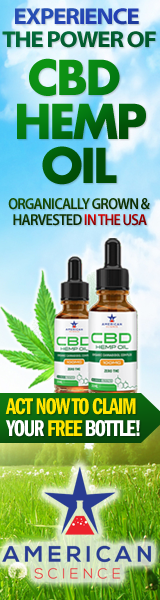
<style>
.page{position:relative;width:160px;height:600px}
.page>*{position:absolute;margin:0}
.t1{font:22.9px/23px "MyriadPro-BoldSemiExt";letter-spacing:-0.05em;color:#02683a;text-transform:uppercase}
.t2{font:22.9px/23px "MyriadPro-BoldSemiExt";letter-spacing:-0.05em;color:#233fb4;text-transform:uppercase}
.t3{font:46.7px/44px "FuturaLT-Bold";letter-spacing:-0.05em}
.t4{font:15.8px/16px "MyriadPro-SemiboldSemiCn";letter-spacing:-0.05em;color:#103101;text-transform:uppercase}
.t5{font:15.8px/16px "MyriadPro-SemiboldSemiCn";letter-spacing:-0.05em;color:#fe0000;text-transform:uppercase}
.t6{font:23.4px/22px "FranklinGothicLT-DemiCmpr";letter-spacing:-0.05em;color:#ffe400;text-transform:uppercase}
.t7{font:23.4px/22px "FranklinGothicLT-DemiCmpr";letter-spacing:-0.05em;color:#ffffff;text-transform:uppercase}
</style>
<div class="page">
<p class="t1" style="left:2px;top:8px;width:154px;height:40px"><span class="t2">   Experience <br></span>The Power Of</p>
<p class="t3" style="left:17px;top:58px;width:129px;height:127px">CBD <br>HEMP <br>  OIL</p>
<p class="t4" style="left:8px;top:198px;width:142px;height:28px">Organically Grown &amp; <br>  Harvested <span class="t5">In The USA</span></p>
<p class="t6" style="left:5px;top:398px;width:135px;height:39px">Act Now To Claim <br><span class="t7">Your </span>Free<span class="t7"> Bottle!</span></p>
</div>
